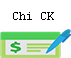
<style>
.page{position:relative;width:71px;height:58px;background:#ffffff}
.page>*{position:absolute;margin:0}
.t1{font:12px "CourierNewPSMT";color:#000000}
</style>
<div class="page">
<p class="t1" style="left:13px;top:12px;width:41px;height:8px">Chi CK</p>
</div>
